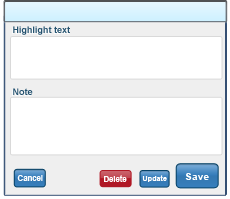
<style>
.page{position:relative;width:230px;height:199px;background:#ffffff}
.page>*{position:absolute;margin:0}
.t1{font:9px "Arial-BoldMT"}
.t2{font:9px "Arial-BoldMT";color:#24526f}
.t3{font:10.4px "Arial-BoldMT";color:#ffffff}
.t4{font:7.7px "Arial-BoldMT";color:#ffffff}
.t5{font:7.3px "Arial-BoldMT";color:#ffffff}
</style>
<div class="page">
<p class="t1" style="left:12px;top:25px;width:58px;height:9px">Highlight text</p>
<p class="t2" style="left:13px;top:26px;width:57px;height:9px">Highlight text</p>
<p class="t2" style="left:13px;top:88px;width:20px;height:7px">Note</p>
<p class="t3" style="left:185px;top:173px;width:24px;height:7px">Save</p>
<p class="t4" style="left:17px;top:175px;width:26px;height:6px">Cancel</p>
<p class="t4" style="left:104px;top:175px;width:23px;height:7px">Delete</p>
<p class="t5" style="left:142px;top:175px;width:25px;height:7px">Update</p>
</div>
